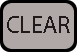
<style>
.page{position:relative;width:77px;height:52px;background:#b0a7a7}
.page>*{position:absolute;margin:0}
.t1{font:24px "MyriadPro-Regular";color:#201a1a}
</style>
<div class="page">
<p class="t1" style="left:7px;top:16px;width:63px;height:17px">CLEAR</p>
</div>
